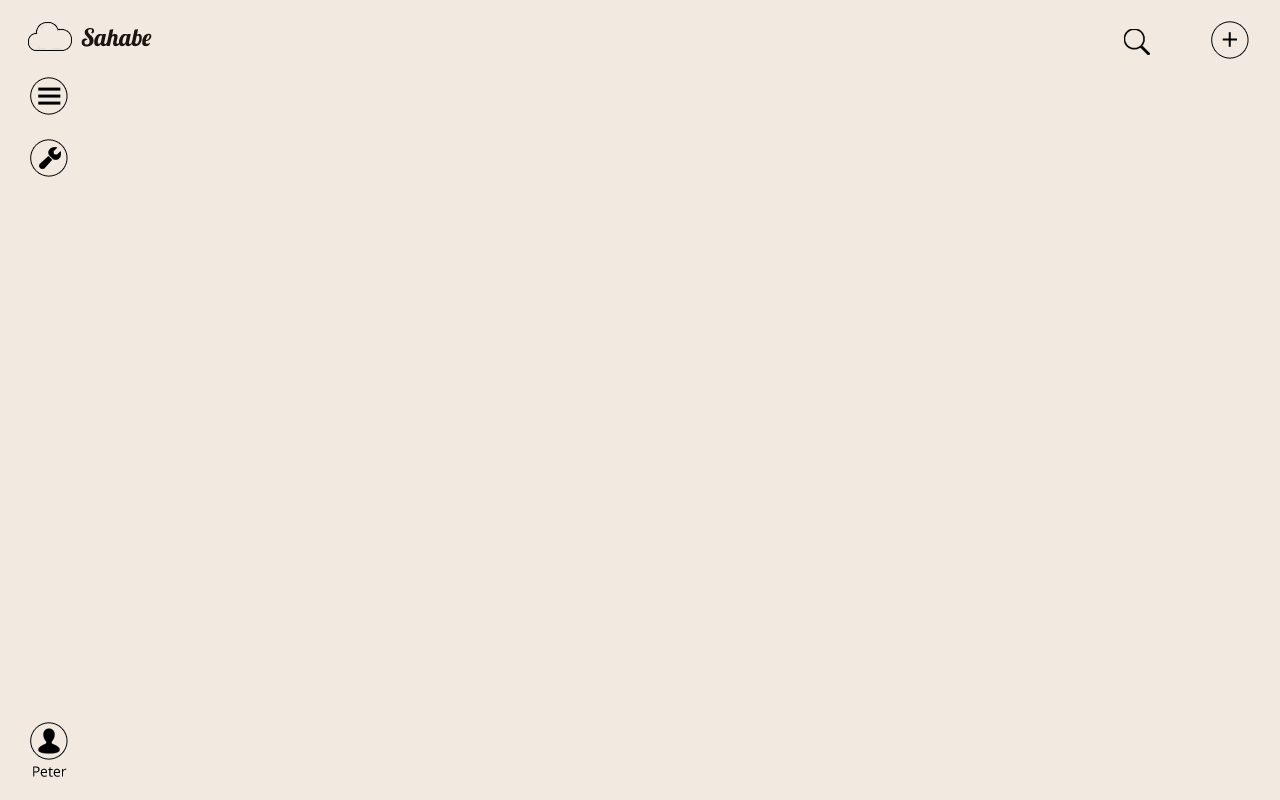
<style>
.page{position:relative;width:1280px;height:800px;background:#f2e9e1}
.page>*{position:absolute;margin:0}
.t1{font:24px "Lobster";color:#1c140d}
.t2{font:30px "OpenSans";color:#000000}
.t3{font:14px "OpenSans";color:#000000}
</style>
<div class="page">
<p class="t1" style="left:81px;top:28px;width:71px;height:19px">Sahabe</p>
<p class="t2" style="left:1222px;top:32px;width:15px;height:15px">+</p>
<p class="t3" style="left:33px;top:766px;width:34px;height:11px">Peter</p>
</div>
